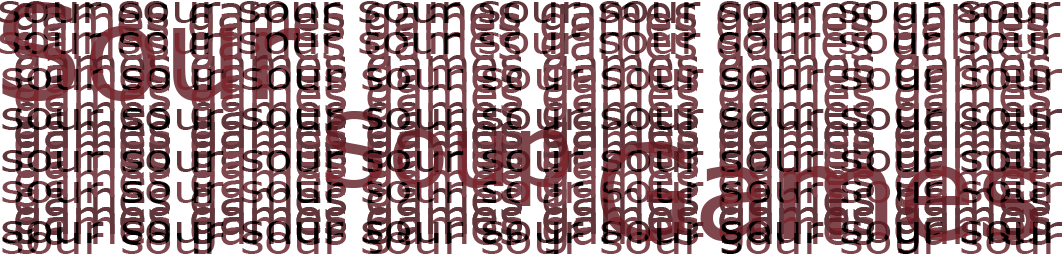
<style>
.page{position:relative;width:1062px;height:254px;background:#ffffff}
.page>*{position:absolute;margin:0}
.t1{font:38.9px "MSReferenceSansSerif";scale:1.21 1}
.t2{font:130px "MSReferenceSansSerif";color:#7c363c}
.t3{font:100px "MSReferenceSansSerif"}
.t4{font:130px "MSReferenceSansSerif"}
</style>
<div class="page">
<p class="t1" style="left:0px;top:1px;width:1061px;height:22px">sour sour sour sour sour sour sour sour sour</p>
<p class="t2" style="left:2px;top:2px;width:298px;height:99px">Sour</p>
<p class="t1" style="left:0px;top:32px;width:1061px;height:22px">sour sour sour sour sour sour sour sour sour</p>
<p class="t1" style="left:2px;top:68px;width:1061px;height:22px">sour sour sour sour sour sour sour sour sour</p>
<p class="t1" style="left:2px;top:108px;width:1061px;height:22px">sour sour sour sour sour sour sour sour sour</p>
<p class="t3" style="left:326px;top:111px;width:244px;height:95px">Soup</p>
<p class="t1" style="left:2px;top:150px;width:1061px;height:22px">sour sour sour sour sour sour sour sour sour</p>
<p class="t4" style="left:600px;top:142px;width:439px;height:99px">Games</p>
<p class="t1" style="left:2px;top:181px;width:1061px;height:22px">sour sour sour sour sour sour sour sour sour</p>
<p class="t1" style="left:2px;top:221px;width:1061px;height:22px">sour sour sour sour sour sour sour sour sour</p>
<p class="t1" style="left:2px;top:232px;width:1061px;height:22px">sour sour sour sour sour sour sour sour sour</p>
</div>
